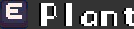
<style>
.page{position:relative;width:134px;height:29px;background:#333333}
.page>*{position:absolute;margin:0}
.t1{font:30px "ManaspaceReg";color:#ffffff}
</style>
<div class="page">
<p class="t1" style="left:41px;top:3px;width:93px;height:23px">Plant</p>
</div>
